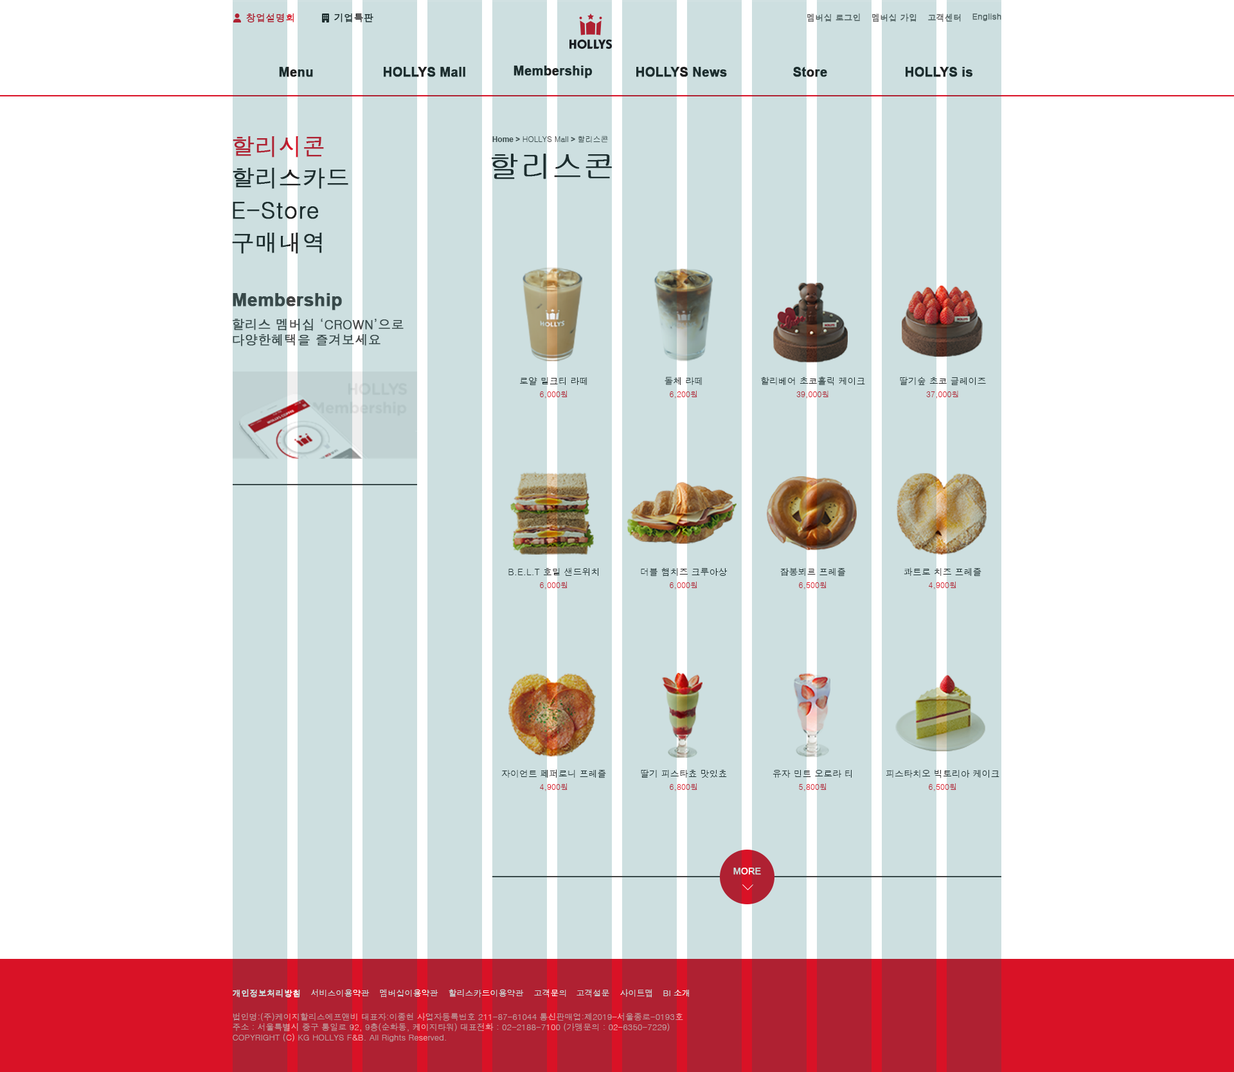
<style>
.page{position:relative;width:1234px;height:1072px;background:#ffffff}
.page>*{position:absolute;margin:0}
.t1{font:9.6px "Dotum";color:#af2132;font-weight:bold}
.t2{font:9.6px "Dotum";color:#222222;font-weight:bold}
.t3{font:8.4px "Dotum";color:#666666;font-weight:bold}
.t4{font:12.9px "Arial-BoldMT";color:#222222;font-weight:bold}
.t5{font:23.1px "Dotum";color:#af2132;font-weight:bold}
.t6{font:7.7px "Gulim";color:#444444}
.t7{font:7.7px "Arial-BoldMT";color:#444444}
.t8{font:30.9px "Gulim";color:#222222;font-weight:bold}
.t9{font:23.1px "Dotum";color:#222222;font-weight:bold}
.t10{font:18px "Arial-BoldMT";color:#444444;font-weight:bold}
.t11{font:12.9px "Dotum";color:#444444;font-weight:bold}
.t12{font:9px "Dotum";color:#222222}
.t13{font:7.7px "Dotum";color:#af2132}
.t14{font:9px "ArialMT";font-weight:bold}
.t15{font:8.4px "Dotum";color:#cddfe0;font-weight:bold}
.t16{font:8.4px "Dotum";color:#cddfe0}
.t17{font:8.4px "Dotum"}
.t18{font:8.4px "Dotum";color:#bf999c}
</style>
<div class="page">
<p class="t1" style="left:246px;top:14px;width:48px;height:8px">창업설명회</p>
<p class="t2" style="left:334px;top:14px;width:40px;height:8px">기업특판</p>
<p class="t3" style="left:807px;top:14px;width:53px;height:8px">멤버십 로그인</p>
<p class="t3" style="left:872px;top:14px;width:45px;height:8px">멤버십 가입</p>
<p class="t3" style="left:928px;top:14px;width:33px;height:8px">고객센터</p>
<p class="t3" style="left:973px;top:14px;width:29px;height:7px">English</p>
<p class="t4" style="left:514px;top:66px;width:79px;height:12px">Membership</p>
<p class="t4" style="left:279px;top:67px;width:34px;height:10px">Menu</p>
<p class="t4" style="left:384px;top:67px;width:81px;height:10px">HOLLYS Mall</p>
<p class="t4" style="left:636px;top:67px;width:91px;height:10px">HOLLYS News</p>
<p class="t4" style="left:793px;top:67px;width:34px;height:10px">Store</p>
<p class="t4" style="left:906px;top:67px;width:67px;height:10px">HOLLYS is</p>
<p class="t5" style="left:233px;top:136px;width:91px;height:22px">할리시콘</p>
<p class="t6" style="left:492px;top:136px;width:116px;height:7px"><span class="t7">Home &gt; </span>HOLLYS Mall<span class="t7"> &gt; </span>할리스콘</p>
<p class="t8" style="left:492px;top:154px;width:120px;height:25px">할리스콘</p>
<p class="t9" style="left:233px;top:168px;width:115px;height:21px">할리스카드</p>
<p class="t9" style="left:233px;top:202px;width:85px;height:17px">E-Store</p>
<p class="t9" style="left:232px;top:233px;width:90px;height:21px">구매내역</p>
<p class="t10" style="left:233px;top:293px;width:109px;height:17px">Membership</p>
<p class="t11" style="left:232px;top:318px;width:172px;height:28px">할리스 멤버십 ‘CROWN’으로<br>다양한혜택을 즐겨보세요</p>
<p class="t12" style="left:520px;top:377px;width:67px;height:9px">로얄 밀크티 라떼</p>
<p class="t12" style="left:665px;top:377px;width:37px;height:8px">돌체 라떼</p>
<p class="t12" style="left:761px;top:377px;width:104px;height:9px">할리베어 초코홀릭 케이크</p>
<p class="t12" style="left:900px;top:377px;width:86px;height:9px">딸기숲 초코 글레이즈</p>
<p class="t13" style="left:540px;top:391px;width:28px;height:8px">6,000원</p>
<p class="t13" style="left:670px;top:391px;width:28px;height:8px">6,200원</p>
<p class="t13" style="left:797px;top:391px;width:32px;height:8px">39,000원</p>
<p class="t13" style="left:926px;top:391px;width:33px;height:8px">37,000원</p>
<p class="t12" style="left:509px;top:568px;width:90px;height:8px">B.E.L.T 호밀 샌드위치</p>
<p class="t12" style="left:641px;top:568px;width:87px;height:9px">더블 햄치즈 크루아상</p>
<p class="t12" style="left:780px;top:568px;width:66px;height:9px">잠봉뵈르 프레즐</p>
<p class="t12" style="left:904px;top:568px;width:78px;height:9px">콰트로 치즈 프레즐</p>
<p class="t13" style="left:540px;top:582px;width:28px;height:8px">6,000원</p>
<p class="t13" style="left:670px;top:582px;width:28px;height:8px">6,000원</p>
<p class="t13" style="left:799px;top:582px;width:28px;height:8px">6,500원</p>
<p class="t13" style="left:929px;top:582px;width:28px;height:8px">4,900원</p>
<p class="t12" style="left:501px;top:770px;width:105px;height:9px">자이언트 페퍼로니 프레즐</p>
<p class="t12" style="left:641px;top:770px;width:86px;height:9px">딸기 피스타쵸 맛있쵸</p>
<p class="t12" style="left:773px;top:770px;width:79px;height:8px">유자 민트 오로라 티</p>
<p class="t12" style="left:886px;top:770px;width:114px;height:9px">피스타치오 빅토리아 케이크</p>
<p class="t13" style="left:540px;top:784px;width:28px;height:7px">4,900원</p>
<p class="t13" style="left:670px;top:784px;width:28px;height:7px">6,800원</p>
<p class="t13" style="left:799px;top:784px;width:28px;height:7px">5,800원</p>
<p class="t13" style="left:929px;top:784px;width:28px;height:7px">6,500원</p>
<p class="t14" style="left:734px;top:868px;width:27px;height:7px">MORE</p>
<p class="t15" style="left:233px;top:989px;width:67px;height:9px">개인정보처리방침</p>
<p class="t16" style="left:311px;top:989px;width:59px;height:8px">서비스이용약관</p>
<p class="t16" style="left:380px;top:989px;width:58px;height:9px">멤버십이용약관</p>
<p class="t16" style="left:449px;top:989px;width:75px;height:9px">할리스카드이용약관</p>
<p class="t17" style="left:534px;top:989px;width:32px;height:9px">고객문의</p>
<p class="t16" style="left:577px;top:989px;width:32px;height:9px">고객설문</p>
<p class="t16" style="left:620px;top:989px;width:32px;height:9px">사이트맵</p>
<p class="t17" style="left:663px;top:990px;width:26px;height:7px">BI 소개</p>
<p class="t18" style="left:233px;top:1013px;width:450px;height:29px">법인명:(주)케이지할리스에프앤비 대표자:이종현 사업자등록번호 211-87-61044 통신판매업:제2019-서울종로-0193호<br>주소 : 서울특별시 중구 통일로 92, 9층(순화동, 케이지타워) 대표전화 : 02-2188-7100 (가맹문의 : 02-6350-7229)<br>COPYRIGHT (C) KG HOLLYS F&amp;B. All Rights Reserved.</p>
</div>
